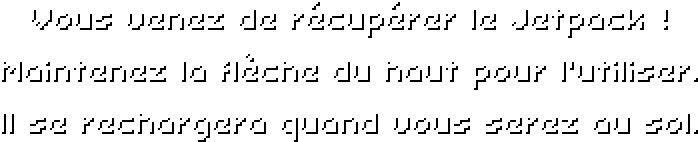
<style>
.page{position:relative;width:698px;height:142px;background:#ffffff}
.page>*{position:absolute;margin:0}
.t1{font:32px/52px "Uni0553"}
</style>
<div class="page">
<p class="t1" style="left:2px;top:2px;width:696px;height:140px;text-align:center">Vous venez de récupérer le Jetpack !<br>Maintenez la flèche du haut pour l’utiliser.<br>Il se rechargera quand vous serez au sol.</p>
</div>
